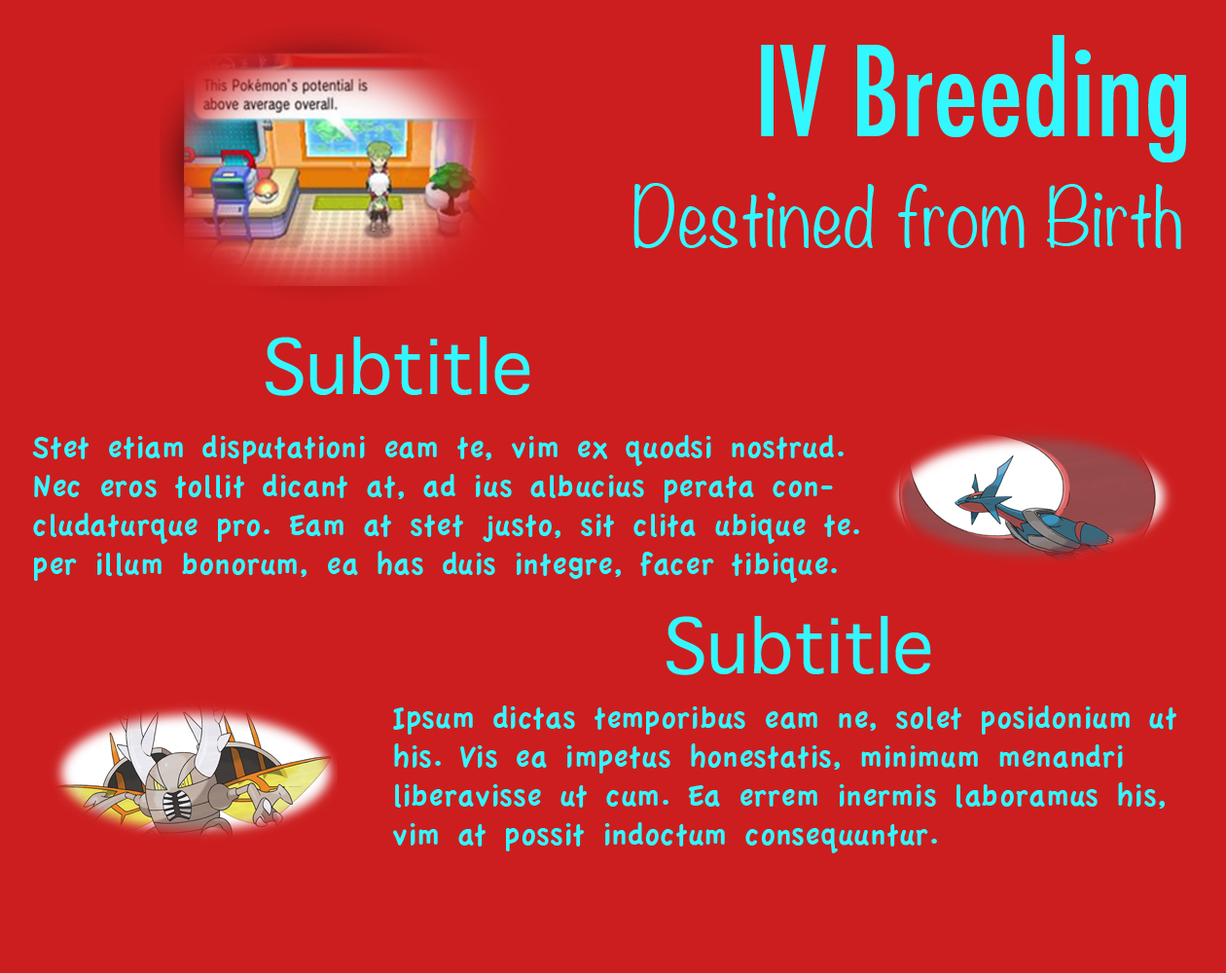
<style>
.page{position:relative;width:1226px;height:973px;background:#cc1e1f}
.page>*{position:absolute;margin:0}
.t1{font:121.6px "Futura-CondensedMedium";color:#33f7ff}
.t2{font:73px "Noteworthy-Light";color:#33f7ff}
.t3{font:73px "Sathu";color:#33f7ff}
.t4{font:32.4px "AppleCasual";color:#33f7ff}
</style>
<div class="page">
<p class="t1" style="left:761px;top:35px;width:425px;height:127px">IV Breeding</p>
<p class="t2" style="left:633px;top:183px;width:548px;height:66px">Destined from Birth</p>
<p class="t3" style="left:266px;top:337px;width:264px;height:59px">Subtitle</p>
<p class="t4" style="left:32px;top:435px;width:827px;height:148px">Stet etiam disputationi eam te, vim ex quodsi nostrud. Nec eros tollit dicant at, ad ius albucius perata concludaturque pro. Eam at stet justo, sit clita ubique te. per illum bonorum, ea has duis integre, facer tibique.</p>
<p class="t3" style="left:666px;top:616px;width:265px;height:59px">Subtitle</p>
<p class="t4" style="left:393px;top:705px;width:783px;height:148px">Ipsum dictas temporibus eam ne, solet posidonium ut his. Vis ea impetus honestatis, minimum menandri liberavisse ut cum. Ea errem inermis laboramus his, vim at possit indoctum consequuntur.</p>
</div>
